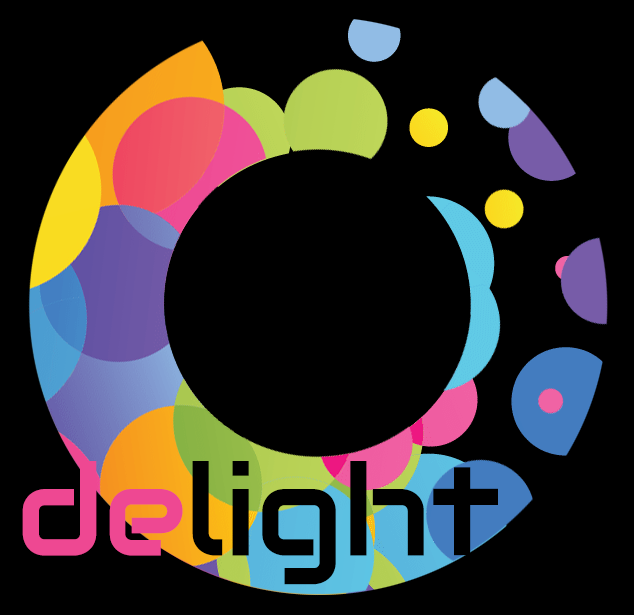
<style>
.page{position:relative;width:634px;height:615px;background:#000000}
.page>*{position:absolute;margin:0}
.t1{font:125.5px "Audiowide-Regular";color:#000000}
.t2{font:125.5px "Tahoma";color:#042335}
.t3{font:125.5px "Audiowide-Regular";color:#ee4892}
</style>
<div class="page">
<p class="t1" style="left:22px;top:461px;width:476px;height:124px"><span class="t2"> </span><span class="t3">de</span>light</p>
</div>
